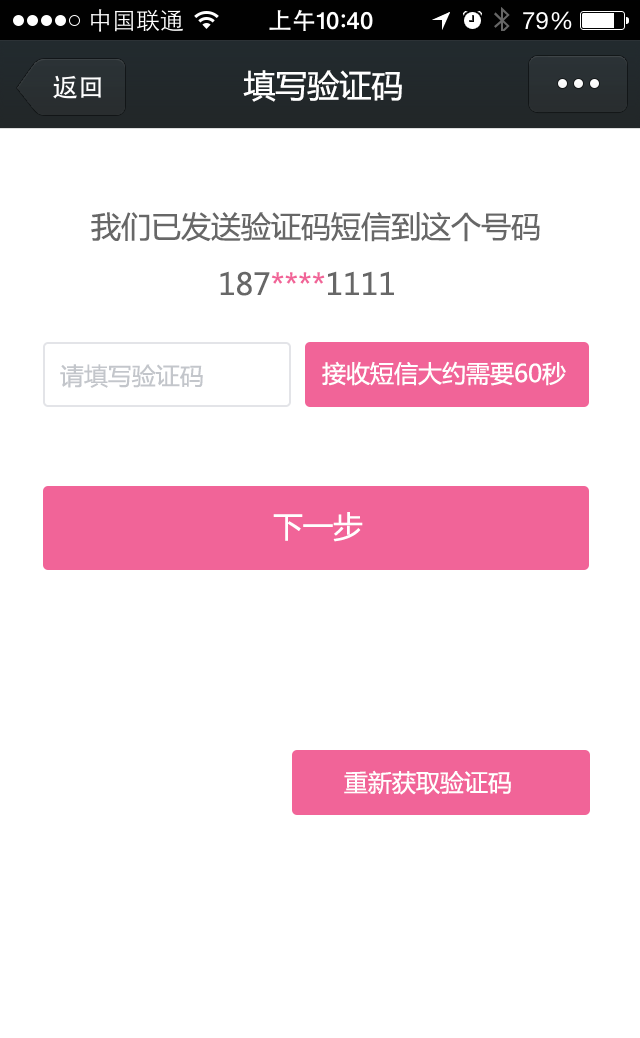
<style>
.page{position:relative;width:640px;height:1038px;background:#ffffff}
.page>*{position:absolute;margin:0}
.t1{font:32px "MicrosoftYaHei";color:#ffffff}
.t2{font:30px "MicrosoftYaHei";color:#676767}
.t3{font:30px "MicrosoftYaHei";color:#f16498}
.t4{font:24px "MicrosoftYaHei";color:#c3c6cb}
.t5{font:24px "MicrosoftYaHei";color:#ffffff}
.t6{font:30px "MicrosoftYaHei";color:#ffffff}
</style>
<div class="page">
<p class="t1" style="left:243px;top:70px;width:159px;height:32px">填写验证码</p>
<p class="t2" style="left:91px;top:212px;width:449px;height:30px">我们已发送验证码短信到这个号码</p>
<p class="t3" style="left:220px;top:271px;width:174px;height:25px"><span class="t2">187</span>****<span class="t2">1111</span></p>
<p class="t4" style="left:60px;top:364px;width:143px;height:24px">请填写验证码</p>
<p class="t5" style="left:322px;top:361px;width:244px;height:25px">接收短信大约需要60秒</p>
<p class="t6" style="left:273px;top:512px;width:90px;height:30px">下一步</p>
<p class="t5" style="left:344px;top:770px;width:167px;height:25px">重新获取验证码</p>
</div>
